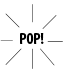
<style>
.page{position:relative;width:64px;height:70px;background:#ffffff}
.page>*{position:absolute;margin:0}
.t1{font:15px "MyriadPro-BoldCond";color:#000000}
</style>
<div class="page">
<p class="t1" style="left:20px;top:33px;width:24px;height:11px">POP!</p>
</div>
